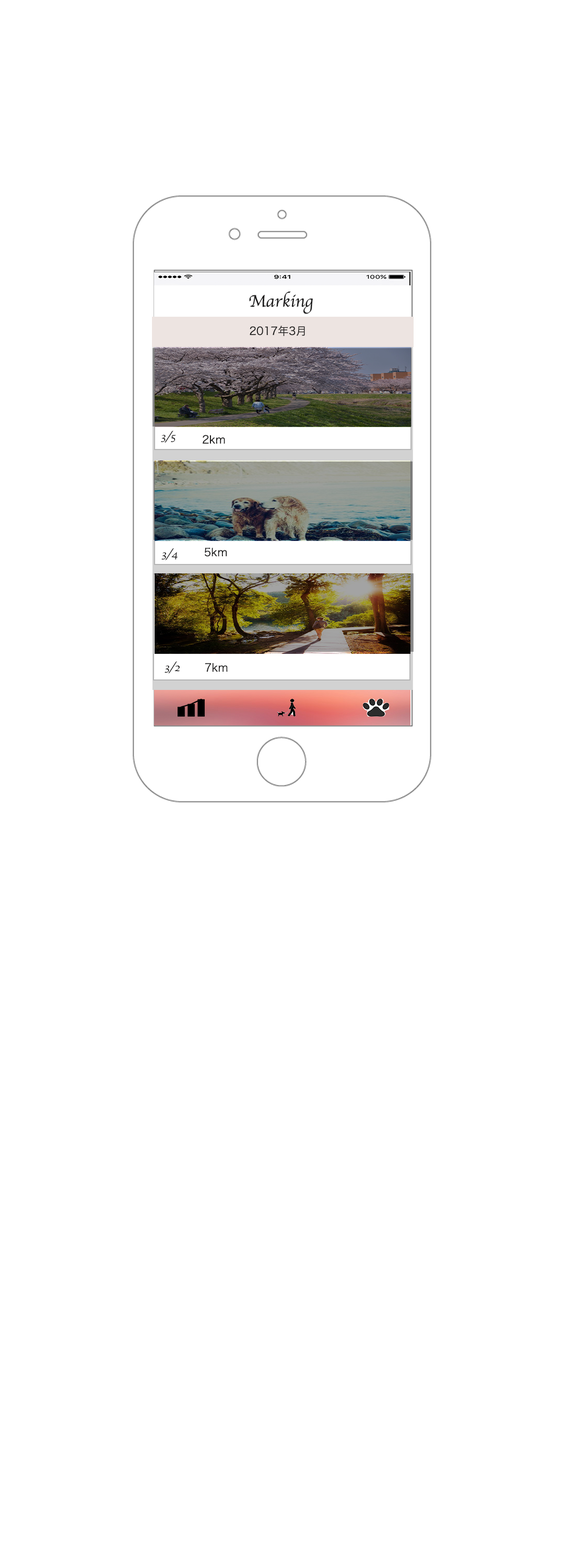
<style>
.page{position:relative;width:564px;height:1568px;background:#ffffff}
.page>*{position:absolute;margin:0}
.t1{font:17.4px "Apple-Chancery";color:#1e1d1d}
.t2{font:10.9px "HiraKakuProN-W3";color:#1e1d1d}
.t3{font:10.9px "Apple-Chancery";color:#1e1d1d}
</style>
<div class="page">
<p class="t1" style="left:249px;top:291px;width:64px;height:23px">Marking</p>
<p class="t2" style="left:250px;top:326px;width:55px;height:10px">2017年3月</p>
<p class="t3" style="left:161px;top:431px;width:15px;height:12px">3/5</p>
<p class="t2" style="left:203px;top:435px;width:22px;height:9px">2km</p>
<p class="t3" style="left:162px;top:548px;width:16px;height:12px">3/4</p>
<p class="t2" style="left:204px;top:548px;width:23px;height:9px">5km</p>
<p class="t3" style="left:165px;top:661px;width:15px;height:13px">3/2</p>
<p class="t2" style="left:205px;top:663px;width:23px;height:9px">7km</p>
</div>
